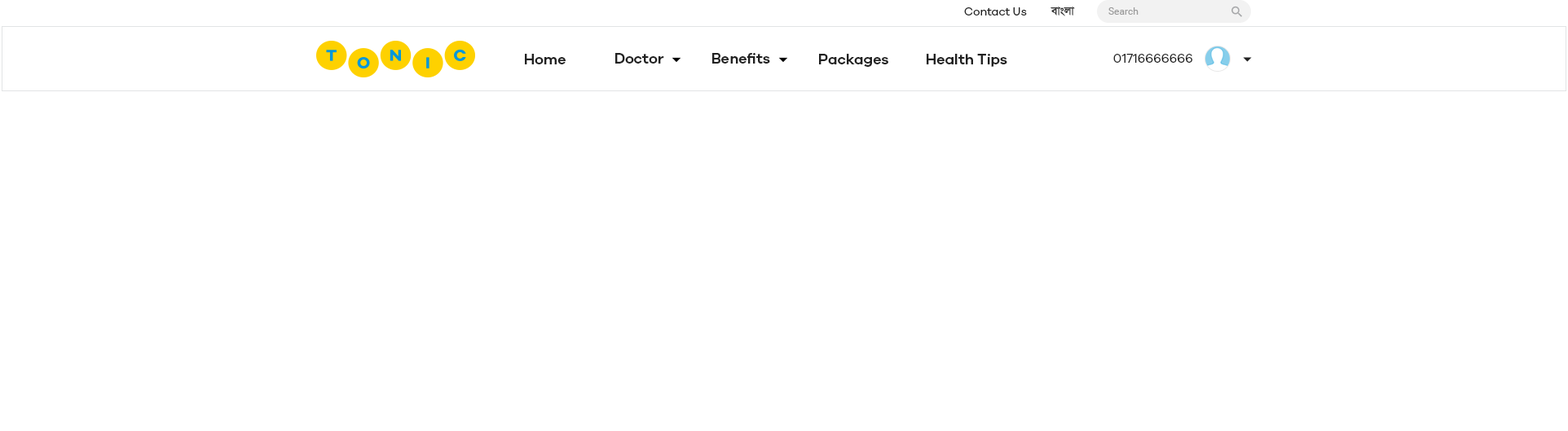
<style>
.page{position:relative;width:1568px;height:431px;background:#ffffff}
.page>*{position:absolute;margin:0}
.t1{font:11.4px "GalanoGrotesque-Regular";color:#212121}
.t2{font:11.4px "SolaimanLipiNormal";color:#212121}
.t3{font:9.8px "Roboto-Regular";color:#9a9a9a}
.t4{font:14.7px "GalanoGrotesque-SemiBold";color:#212121}
.t5{font:13px "GalanoGrotesque-Regular";color:#212121}
</style>
<div class="page">
<p class="t1" style="left:964px;top:7px;width:63px;height:8px">Contact Us</p>
<p class="t2" style="left:1050px;top:7px;width:25px;height:9px">বাংলা</p>
<p class="t3" style="left:1108px;top:7px;width:31px;height:8px">Search</p>
<p class="t4" style="left:525px;top:54px;width:41px;height:10px">Home</p>
<p class="t4" style="left:615px;top:53px;width:49px;height:11px">Doctor</p>
<p class="t4" style="left:712px;top:53px;width:58px;height:11px">Benefits</p>
<p class="t4" style="left:819px;top:54px;width:69px;height:13px">Packages</p>
<p class="t4" style="left:927px;top:54px;width:80px;height:13px">Health Tips</p>
<p class="t5" style="left:1113px;top:54px;width:79px;height:9px">01716666666</p>
</div>
